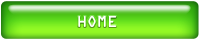
<style>
.page{position:relative;width:200px;height:40px}
.page>*{position:absolute;margin:0}
.t1{font:14px "OCRAStd";color:#ffffff}
</style>
<div class="page">
<p class="t1" style="left:78px;top:16px;width:39px;height:11px">HOME</p>
</div>
